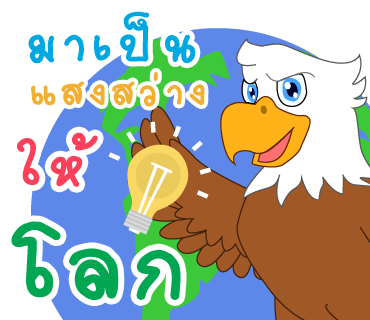
<style>
.page{position:relative;width:370px;height:320px;background:#ffffff}
.page>*{position:absolute;margin:0}
.t1{font:77px "2005_iannnnnMTV";letter-spacing:0.075em;color:#00a8e1;scale:1.06 1}
.t2{font:57px "2005_iannnnnMTV";letter-spacing:0.075em;color:#f2af32;scale:1.06 1}
.t3{font:85px "2005_iannnnnMTV";letter-spacing:0.075em;color:#fa405a;scale:1.06 1}
.t4{font:141px "2005_iannnnnMTV";letter-spacing:0.075em;color:#00a651;scale:1.06 1}
</style>
<div class="page">
<p class="t1" style="left:28px;top:11px;width:168px;height:53px">มาเป็น</p>
<p class="t2" style="left:31px;top:72px;width:174px;height:35px">แสงสว่าง</p>
<p class="t3" style="left:17px;top:132px;width:81px;height:55px">ให้</p>
<p class="t4" style="left:11px;top:221px;width:170px;height:79px">โลก</p>
</div>
